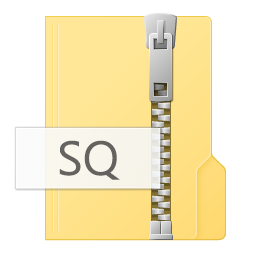
<style>
.page{position:relative;width:256px;height:256px;background:#ffffff}
.page>*{position:absolute;margin:0}
.t1{font:48px "SegoeUI";color:#64635e}
</style>
<div class="page">
<p class="t1" style="left:59px;top:140px;width:61px;height:40px">SQ</p>
</div>
